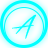
<style>
.page{position:relative;width:48px;height:48px}
.page>*{position:absolute;margin:0}
.t1{font:18px "Streamster";letter-spacing:0.025em;color:#00ffff;font-weight:bold}
</style>
<div class="page">
<p class="t1" style="left:12px;top:14px;width:25px;height:25px">A</p>
</div>
